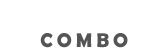
<style>
.page{position:relative;width:165px;height:50px;background:#ffffff}
.page>*{position:absolute;margin:0}
.t1{font:20px "BerlinSansFBDemi-Bold";letter-spacing:0.2em;color:#555555}
</style>
<div class="page">
<p class="t1" style="left:40px;top:33px;width:88px;height:15px">COMBO</p>
</div>
